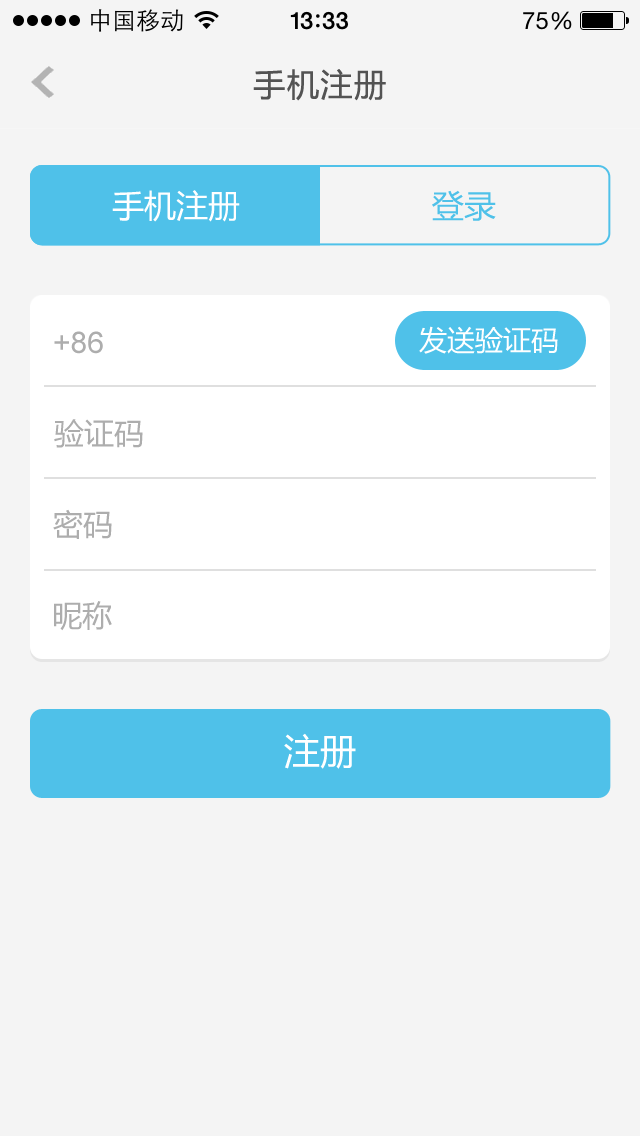
<style>
.page{position:relative;width:640px;height:1136px;background:#f4f4f4}
.page>*{position:absolute;margin:0}
.t1{font:32px "MicrosoftYaHei";letter-spacing:0.05em;color:#535353}
.t2{font:32px "MicrosoftYaHei";color:#ffffff}
.t3{font:32px "MicrosoftYaHei";color:#4fc1e9}
.t4{font:28px "MicrosoftYaHei";color:#ffffff}
.t5{font:30px "ArialMT";color:#adadad}
.t6{font:30px "MicrosoftYaHei";color:#adadad}
.t7{font:36px "MicrosoftYaHei";color:#ffffff}
</style>
<div class="page">
<p class="t1" style="left:253px;top:69px;width:133px;height:32px">手机注册</p>
<p class="t2" style="left:112px;top:190px;width:128px;height:32px">手机注册</p>
<p class="t3" style="left:432px;top:190px;width:64px;height:31px">登录</p>
<p class="t4" style="left:419px;top:326px;width:139px;height:28px">发送验证码</p>
<p class="t5" style="left:54px;top:331px;width:49px;height:23px">+86</p>
<p class="t6" style="left:54px;top:419px;width:89px;height:29px">验证码</p>
<p class="t6" style="left:53px;top:509px;width:59px;height:30px">密码</p>
<p class="t6" style="left:54px;top:601px;width:58px;height:30px">昵称</p>
<p class="t7" style="left:284px;top:733px;width:72px;height:36px">注册</p>
</div>
